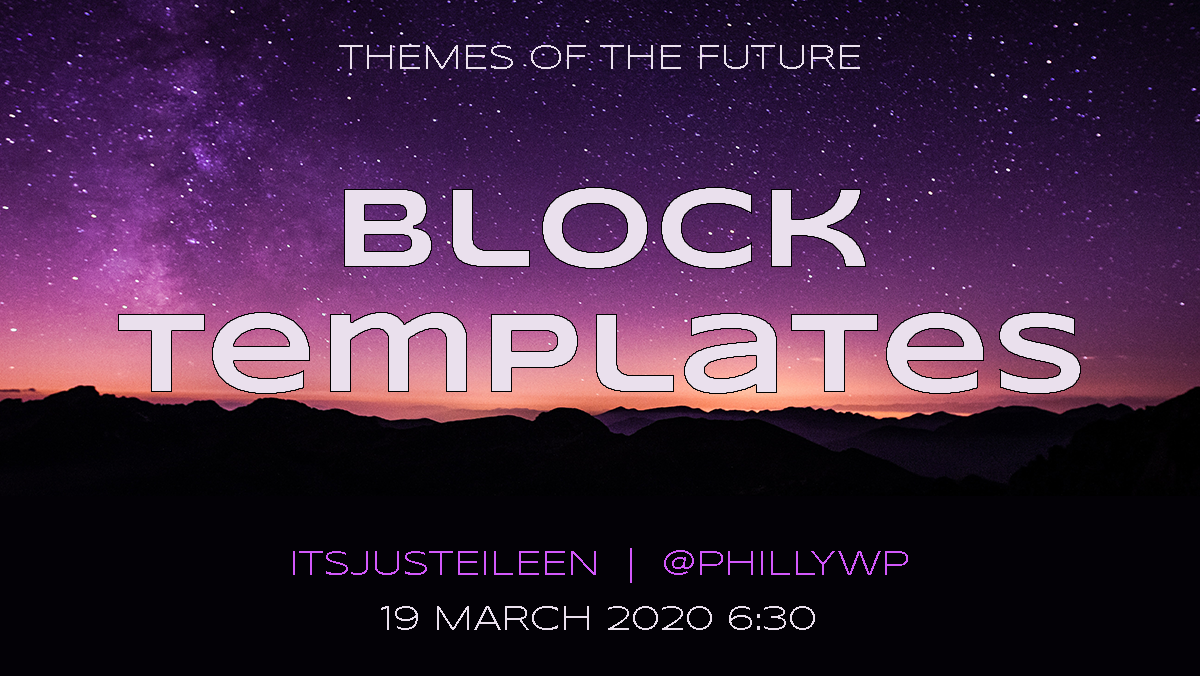
<style>
.page{position:relative;width:1200px;height:676px;background:#030106}
.page>*{position:absolute;margin:0}
.t1{font:34.7px "Syncopate-Regular";color:#eae0ed}
.t2{font:115.7px/6.9px "Syncopate-Bold";color:#eae0ed}
.t3{font:34.7px/6.9px "Syncopate-Regular";color:#d358fb;text-transform:uppercase}
.t4{font:34.7px/6.9px "Syncopate-Regular";color:#eae0ed;text-transform:uppercase}
</style>
<div class="page">
<p class="t1" style="left:339px;top:45px;width:521px;height:24px">THEMES OF THE FUTURE</p>
<p class="t2" style="left:118px;top:187px;width:963px;height:207px;text-align:center">Block<br><br><br><br><br><br><br><br><br><br><br><br><br><br><br><br><br><br>Templates</p>
<p class="t3" style="left:293px;top:548px;width:615px;height:82px;text-align:center">itsjusteileen  |  @phillywp<br><span class="t4"><br><br><br><br><br><br><br>19 March 2020 6:30</span></p>
</div>
